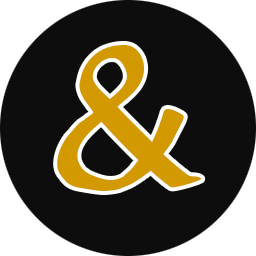
<style>
.page{position:relative;width:256px;height:256px;background:#0d0d0d}
.page>*{position:absolute;margin:0}
.t1{font:256px "Aniron";color:#d29900}
</style>
<div class="page">
<p class="t1" style="left:57px;top:45px;width:145px;height:146px">&amp;</p>
</div>
